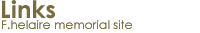
<style>
.page{position:relative;width:200px;height:33px;background:#ffffff}
.page>*{position:absolute;margin:0}
.t1{font:24px "CenturyGothic-Bold";letter-spacing:0.01em;color:#776d3c}
.t2{font:12px "CenturyGothic";letter-spacing:0.01em;color:#776d3c}
</style>
<div class="page">
<p class="t1" style="left:2px;top:0px;width:53px;height:19px">Links</p>
<p class="t2" style="left:2px;top:20px;width:130px;height:9px">F.helaire memorial site</p>
</div>
